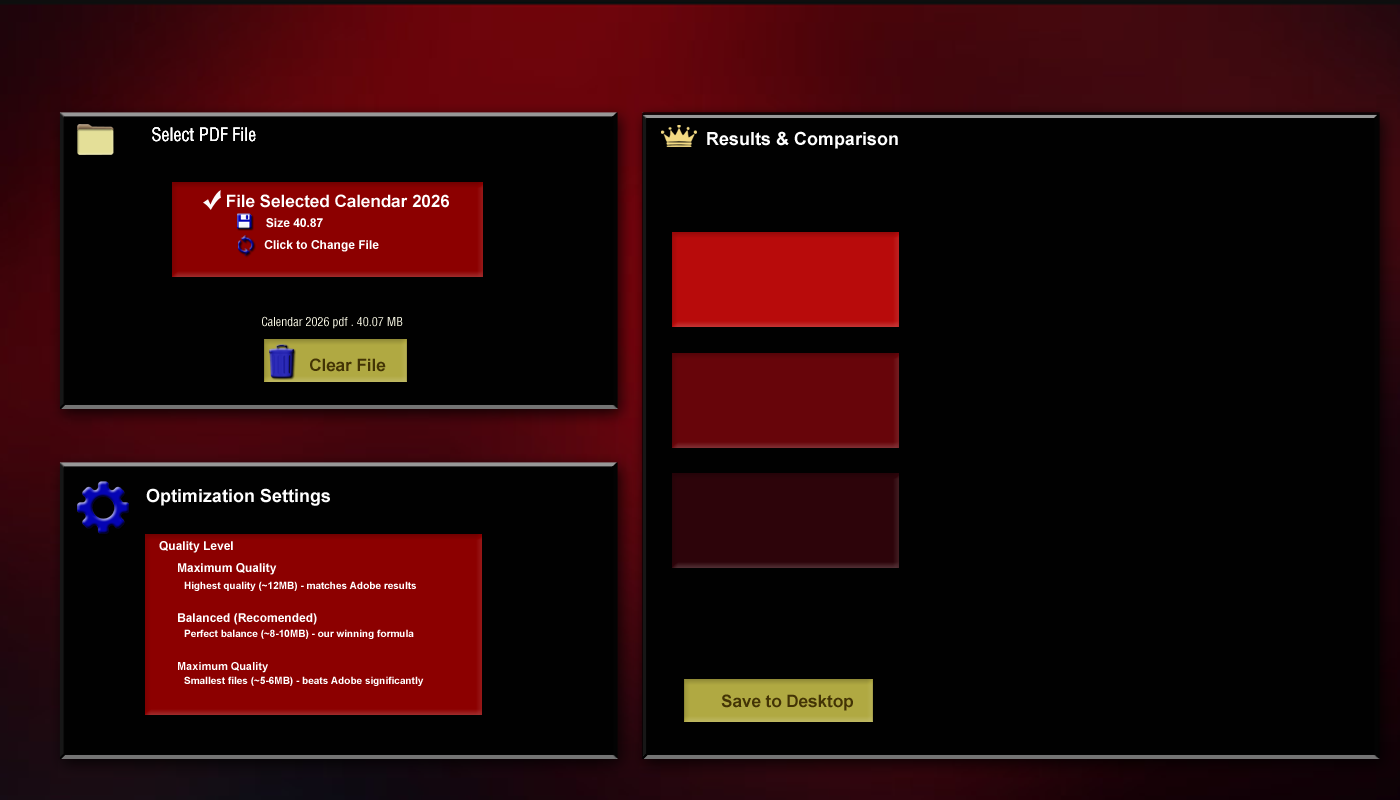
<style>
.page{position:relative;width:1400px;height:800px;background:#010101}
.page>*{position:absolute;margin:0}
.t1{font:18px "HelveticaLTStd-Cond";color:#fefefe}
.t2{font:18px "Arial-BoldMT";color:#ffffff}
.t3{font:17px "Arial-BoldMT";color:#ffffff}
.t4{font:12px "Arial-BoldMT";color:#ffffff}
.t5{font:12px "HelveticaLTStd-Cond";color:#fdfce9}
.t6{font:17px "Arial-BoldMT";color:#433405}
.t7{font:10px "Arial-BoldMT";color:#ffffff}
.t8{font:11px "Arial-BoldMT";color:#ffffff}
</style>
<div class="page">
<p class="t1" style="left:152px;top:127px;width:104px;height:15px">Select PDF File</p>
<p class="t1" style="left:152px;top:127px;width:104px;height:15px">Select PDF File</p>
<p class="t1" style="left:152px;top:127px;width:104px;height:15px">Select PDF File</p>
<p class="t2" style="left:707px;top:131px;width:191px;height:18px">Results &amp; Comparison</p>
<p class="t3" style="left:227px;top:194px;width:222px;height:14px">File Selected Calendar 2026</p>
<p class="t4" style="left:266px;top:218px;width:57px;height:10px">Size 40.87</p>
<p class="t4" style="left:264px;top:240px;width:115px;height:12px">Click to Change File</p>
<p class="t5" style="left:262px;top:316px;width:141px;height:13px">Calendar 2026 pdf . 40.07 MB</p>
<p class="t6" style="left:310px;top:358px;width:76px;height:14px">Clear File</p>
<p class="t2" style="left:146px;top:488px;width:184px;height:18px">Optimization Settings</p>
<p class="t4" style="left:159px;top:541px;width:74px;height:12px">Quality Level</p>
<p class="t4" style="left:178px;top:563px;width:99px;height:12px">Maximum Quality</p>
<p class="t7" style="left:184px;top:581px;width:232px;height:10px">Highest quality (~12MB) - matches Adobe results</p>
<p class="t4" style="left:178px;top:613px;width:139px;height:12px">Balanced (Recomended)</p>
<p class="t7" style="left:184px;top:629px;width:230px;height:10px">Perfect balance (~8-10MB) - our winning formula</p>
<p class="t8" style="left:178px;top:662px;width:90px;height:11px">Maximum Quality</p>
<p class="t7" style="left:184px;top:676px;width:240px;height:10px">Smallest files (~5-6MB) - beats Adobe significantly</p>
<p class="t6" style="left:721px;top:694px;width:132px;height:17px">Save to Desktop</p>
</div>
